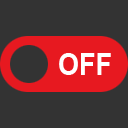
<style>
.page{position:relative;width:128px;height:128px;background:#333333}
.page>*{position:absolute;margin:0}
.t1{font:31px "Arial-BoldMT";color:#ffffff;scale:0.87 1}
</style>
<div class="page">
<p class="t1" style="left:59px;top:53px;width:52px;height:22px">OFF</p>
</div>
